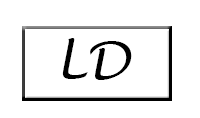
<style>
.page{position:relative;width:200px;height:118px;background:#ffffff}
.page>*{position:absolute;margin:0}
.t1{font:50px "LucidaHandwriting-Italic";color:#000000}
</style>
<div class="page">
<p class="t1" style="left:62px;top:38px;width:70px;height:42px">LD</p>
</div>
